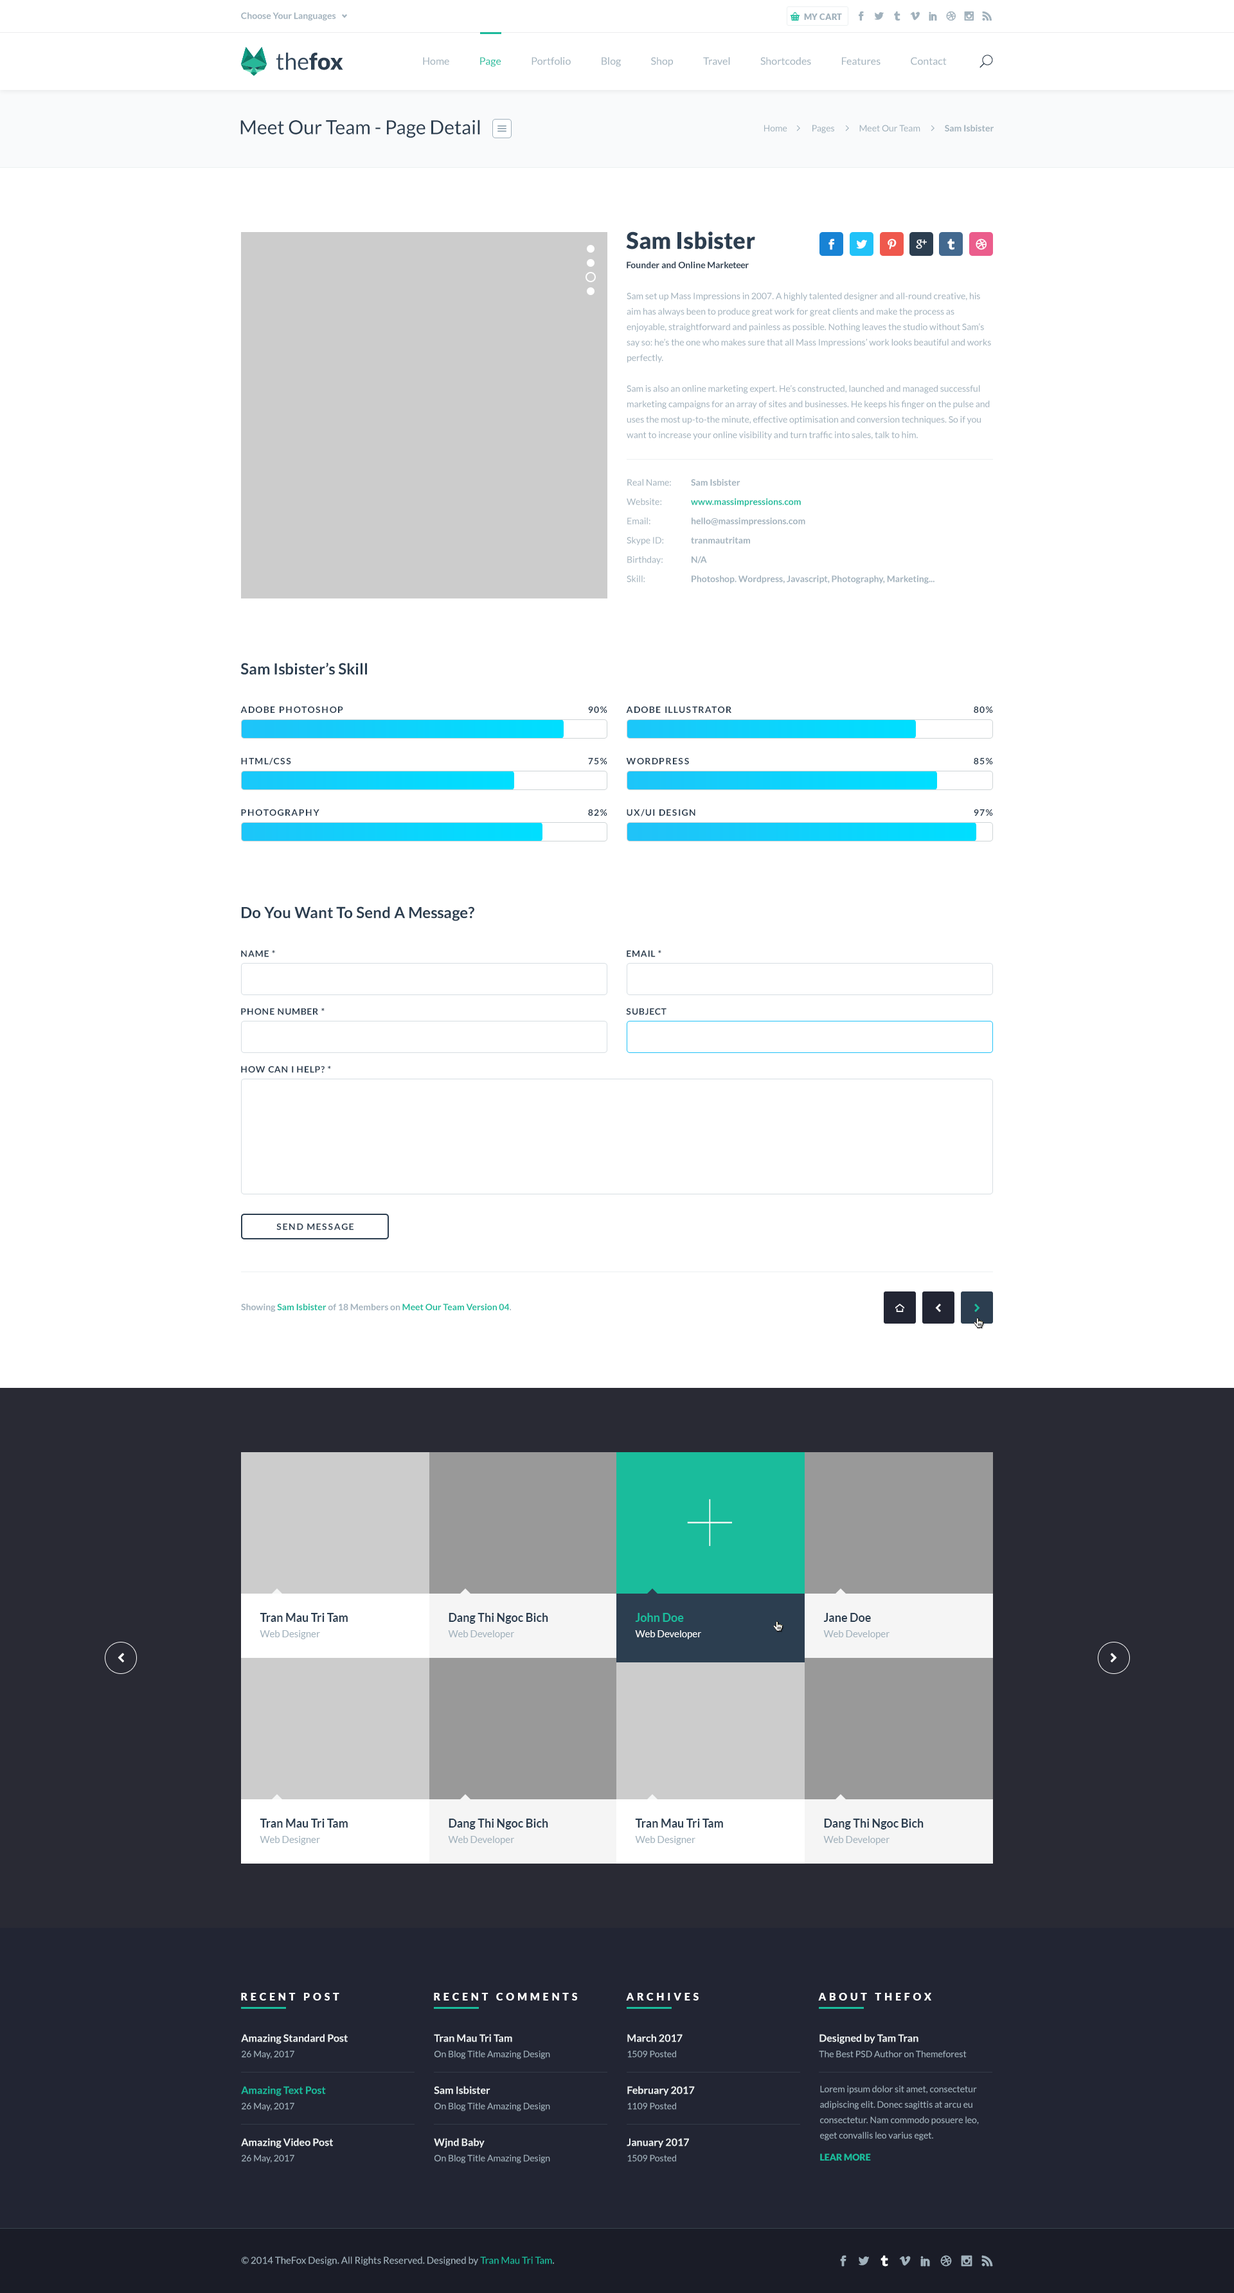
<style>
.page{position:relative;width:1234px;height:2293px;background:#ffffff}
.page>*{position:absolute;margin:0}
.t1{font:9px "Lato-Bold";color:#a1b1bc}
.t2{font:8.4px "Lato-Black";color:#a1b1bc;text-transform:uppercase}
.t3{font:23.1px "Lato-Regular";color:#34495e}
.t4{font:23.1px "Lato-Black";color:#2c3e50}
.t5{font:10.3px "Lato-Regular";color:#a1b1bc}
.t6{font:10.3px "Lato-Regular";color:#1abc9c}
.t7{font:19.3px "Lato-Regular";color:#2c3e50}
.t8{font:9px "Lato-Regular";color:#a1b1bc}
.t9{font:9px/19.3px "Lato-Bold";color:#2c3e50}
.t10{font:23.1px/19.3px "Lato-Black";color:#2c3e50}
.t11{font:9px/15.4px "Lato-Regular";color:#a1b1bc}
.t12{font:9px/19.3px "Lato-Regular";color:#a1b1bc}
.t13{font:9px/19.3px "Lato-Bold";color:#a1b1bc}
.t14{font:9px/19.3px "Lato-Bold";color:#1abc9c}
.t15{font:15.4px "Lato-Bold";color:#2c3e50}
.t16{font:9px "Lato-Bold";letter-spacing:0.1em;color:#2c3e50;text-transform:uppercase}
.t17{font:9px "Lato-Bold";letter-spacing:0.05em;color:#2c3e50}
.t18{font:9px "Lato-Bold";color:#1abc9c}
.t19{font:96.4px "Lato-Hairline";color:#ffffff}
.t20{font:11.6px/15.4px "Lato-Bold";color:#2c3e50}
.t21{font:9.6px/15.4px "Lato-Regular";color:#a1b1bc}
.t22{font:9.6px/15.4px "Lato-Regular";color:#ffffff}
.t23{font:11.6px/15.4px "Lato-Bold";color:#1abc9c}
.t24{font:10.3px "Lato-Black";letter-spacing:0.3em;color:#ffffff}
.t25{font:10.3px/15.4px "Lato-Bold";color:#ecf0f1}
.t26{font:10.3px/15.4px "Lato-Bold";color:#1abc9c}
.t27{font:9px "Lato-Black";color:#1abc9c}
.t28{font:9.6px "Lato-Regular";color:#a1b1bc}
.t29{font:9.6px "Lato-Regular";color:#1abc9c}
</style>
<div class="page">
<p class="t1" style="left:241px;top:12px;width:95px;height:9px">Choose Your Languages</p>
<p class="t2" style="left:804px;top:14px;width:38px;height:6px">my cart</p>
<p class="t3" style="left:276px;top:52px;width:67px;height:18px">the<span class="t4">fox</span></p>
<p class="t5" style="left:423px;top:57px;width:524px;height:10px">Home               <span class="t6">Page</span>               Portfolio               Blog               Shop               Travel               Shortcodes               Features               Contact</p>
<p class="t7" style="left:240px;top:120px;width:240px;height:18px">Meet Our Team - Page Detail</p>
<p class="t8" style="left:764px;top:125px;width:230px;height:8px">Home              Pages              Meet Our Team              <span class="t1">Sam Isbister</span></p>
<p class="t9" style="left:626px;top:231px;width:129px;height:38px"><span class="t10">Sam Isbister<br></span>Founder and Online Marketeer</p>
<p class="t11" style="left:627px;top:292px;width:364px;height:148px">Sam set up Mass Impressions in 2007. A highly talented designer and all-round creative, his aim has always been to produce great work for great clients and make the process as enjoyable, straightforward and painless as possible. Nothing leaves the studio without Sam’s say so: he’s the one who makes sure that all Mass Impressions’ work looks beautiful and works perfectly.<br><br>Sam is also an online marketing expert. He’s constructed, launched and managed successful marketing campaigns for an array of sites and businesses. He keeps his finger on the pulse and uses the most up-to-the minute, effective optimisation and conversion techniques. So if you want to increase your online visibility and turn traffic into sales, talk to him.</p>
<p class="t12" style="left:627px;top:479px;width:44px;height:103px">Real Name:<br>Website:<br>Email:<br>Skype ID:<br>Birthday:<br>Skill:</p>
<p class="t13" style="left:691px;top:479px;width:244px;height:105px">Sam Isbister<br><span class="t14">www.massimpressions.com<br></span>hello@massimpressions.com<br>tranmautritam<br>N/A<br>Photoshop. Wordpress, Javascript, Photography, Marketing...</p>
<p class="t15" style="left:240px;top:663px;width:127px;height:12px">Sam Isbister’s Skill</p>
<p class="t16" style="left:240px;top:706px;width:103px;height:7px">adobe photoshop</p>
<p class="t16" style="left:588px;top:706px;width:20px;height:7px">90%</p>
<p class="t16" style="left:626px;top:706px;width:106px;height:7px">adobe illustrator</p>
<p class="t16" style="left:974px;top:706px;width:19px;height:7px">80%</p>
<p class="t16" style="left:241px;top:757px;width:50px;height:8px">html/css</p>
<p class="t16" style="left:588px;top:758px;width:20px;height:6px">75%</p>
<p class="t16" style="left:626px;top:758px;width:63px;height:6px">wordpress</p>
<p class="t16" style="left:974px;top:758px;width:19px;height:6px">85%</p>
<p class="t16" style="left:241px;top:809px;width:79px;height:7px">photography</p>
<p class="t16" style="left:588px;top:809px;width:20px;height:7px">82%</p>
<p class="t16" style="left:627px;top:809px;width:69px;height:7px">ux/ui design</p>
<p class="t16" style="left:974px;top:809px;width:19px;height:7px">97%</p>
<p class="t15" style="left:242px;top:906px;width:232px;height:15px">Do You Want To Send A Message?</p>
<p class="t17" style="left:241px;top:950px;width:34px;height:7px">NAME *</p>
<p class="t17" style="left:627px;top:950px;width:35px;height:7px">EMAIL *</p>
<p class="t17" style="left:241px;top:1008px;width:84px;height:7px">PHONE NUMBER *</p>
<p class="t17" style="left:626px;top:1008px;width:41px;height:7px">SUBJECT</p>
<p class="t17" style="left:241px;top:1066px;width:90px;height:7px">HOW CAN I HELP? *</p>
<p class="t16" style="left:276px;top:1223px;width:78px;height:7px">send message</p>
<p class="t18" style="left:241px;top:1304px;width:271px;height:8px"><span class="t1">Showing </span>Sam Isbister<span class="t1"> of 18 Members on </span>Meet Our Team Version 04<span class="t1">.</span></p>
<p class="t19" style="left:687px;top:1499px;width:45px;height:47px">+</p>
<p class="t20" style="left:260px;top:1613px;width:88px;height:26px">Tran Mau Tri Tam<br><span class="t21">Web Designer</span></p>
<p class="t20" style="left:448px;top:1613px;width:100px;height:26px">Dang Thi Ngoc Bich<br><span class="t21">Web Developer</span></p>
<p class="t22" style="left:635px;top:1613px;width:66px;height:26px"><span class="t23">John Doe<br></span>Web Developer</p>
<p class="t21" style="left:824px;top:1613px;width:66px;height:26px"><span class="t20">Jane Doe<br></span>Web Developer</p>
<p class="t20" style="left:260px;top:1819px;width:88px;height:26px">Tran Mau Tri Tam<br><span class="t21">Web Designer</span></p>
<p class="t20" style="left:448px;top:1819px;width:100px;height:26px">Dang Thi Ngoc Bich<br><span class="t21">Web Developer</span></p>
<p class="t20" style="left:635px;top:1819px;width:88px;height:26px">Tran Mau Tri Tam<br><span class="t21">Web Designer</span></p>
<p class="t20" style="left:824px;top:1819px;width:100px;height:26px">Dang Thi Ngoc Bich<br><span class="t21">Web Developer</span></p>
<p class="t24" style="left:241px;top:1993px;width:98px;height:8px">RECENT POST</p>
<p class="t24" style="left:434px;top:1993px;width:143px;height:8px">RECENT COMMENTS</p>
<p class="t24" style="left:626px;top:1993px;width:73px;height:8px">ARCHIVES</p>
<p class="t24" style="left:818px;top:1993px;width:114px;height:8px">ABOUT THEFOX</p>
<p class="t25" style="left:241px;top:2034px;width:107px;height:25px">Amazing Standard Post<br><span class="t11">26 May, 2017</span></p>
<p class="t11" style="left:434px;top:2034px;width:116px;height:25px"><span class="t25">Tran Mau Tri Tam<br></span>On Blog Title Amazing Design</p>
<p class="t11" style="left:627px;top:2034px;width:56px;height:24px"><span class="t25">March 2017<br></span>1509 Posted</p>
<p class="t11" style="left:819px;top:2034px;width:148px;height:24px"><span class="t25">Designed by Tam Tran<br></span>The Best PSD Author on Themeforest</p>
<p class="t26" style="left:241px;top:2086px;width:85px;height:25px">Amazing Text Post<br><span class="t11">26 May, 2017</span></p>
<p class="t11" style="left:434px;top:2086px;width:116px;height:25px"><span class="t25">Sam Isbister<br></span>On Blog Title Amazing Design</p>
<p class="t25" style="left:627px;top:2086px;width:68px;height:24px">February 2017<br><span class="t11">1109 Posted</span></p>
<p class="t11" style="left:820px;top:2085px;width:159px;height:56px">Lorem ipsum dolor sit amet, consectetur adipiscing elit. Donec sagittis at arcu eu consectetur. Nam commodo posuere leo, eget convallis leo varius eget.</p>
<p class="t25" style="left:241px;top:2138px;width:92px;height:25px">Amazing Video Post<br><span class="t11">26 May, 2017</span></p>
<p class="t11" style="left:434px;top:2138px;width:116px;height:25px"><span class="t25">Wjnd Baby<br></span>On Blog Title Amazing Design</p>
<p class="t25" style="left:627px;top:2138px;width:62px;height:24px">January 2017<br><span class="t11">1509 Posted</span></p>
<p class="t27" style="left:820px;top:2154px;width:51px;height:7px">LEAR MORE</p>
<p class="t28" style="left:241px;top:2256px;width:313px;height:9px">© 2014 TheFox Design. All Rights Reserved. Designed by <span class="t29">Tran Mau Tri Tam</span>.</p>
</div>
